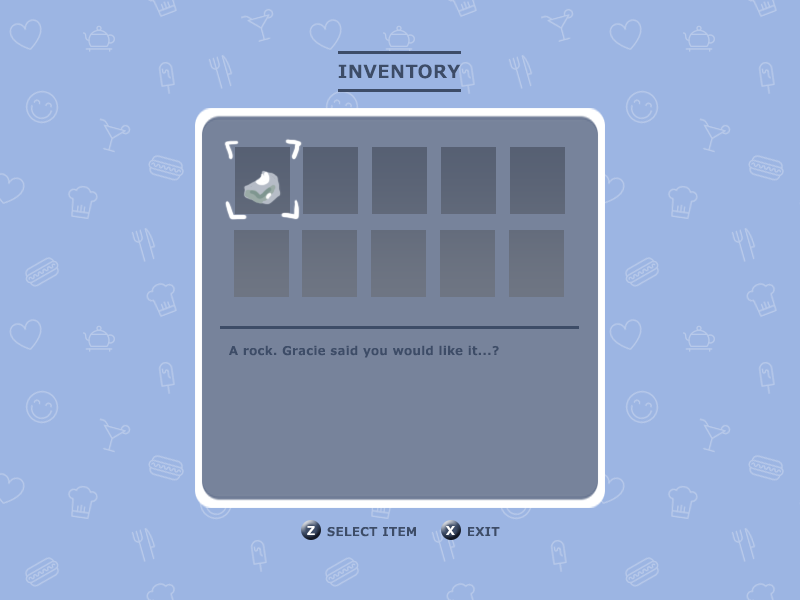
<style>
.page{position:relative;width:800px;height:600px;background:#9cb5e3}
.page>*{position:absolute;margin:0}
.t1{font:18px "Meiryo-Bold";letter-spacing:0.05em;color:#3d4c67}
.t2{font:12px "Meiryo-Bold";letter-spacing:0.05em;color:#3d4c67}
.t3{font:12px "Meiryo-Bold";letter-spacing:0.05em;color:#ffffff}
</style>
<div class="page">
<p class="t1" style="left:338px;top:64px;width:123px;height:15px">INVENTORY</p>
<p class="t2" style="left:229px;top:345px;width:270px;height:13px">A rock. Gracie said you would like it...?</p>
<p class="t3" style="left:307px;top:526px;width:8px;height:9px">Z</p>
<p class="t2" style="left:327px;top:527px;width:89px;height:10px">SELECT ITEM</p>
<p class="t3" style="left:446px;top:526px;width:9px;height:9px">X</p>
<p class="t2" style="left:468px;top:527px;width:32px;height:9px">EXIT</p>
</div>
